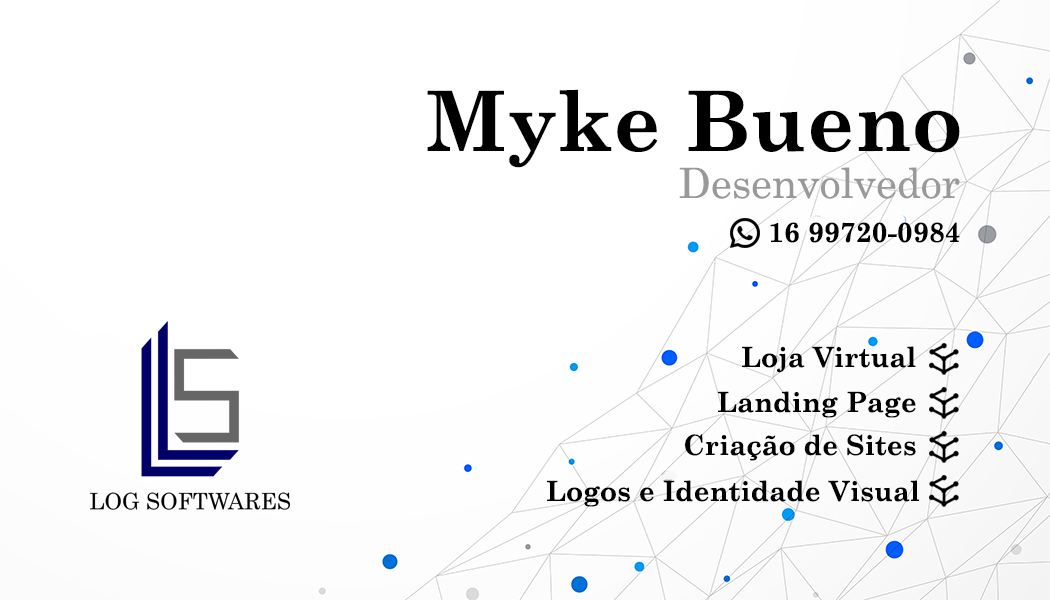
<style>
.page{position:relative;width:1050px;height:600px;background:#ffffff}
.page>*{position:absolute;margin:0}
.t1{font:83.3px "CenturySchoolbook-Bold";color:#000000}
.t2{font:41.7px "CenturySchoolbook";color:#999999}
.t3{font:27.8px "CenturySchoolbook-Bold";color:#000000}
</style>
<div class="page">
<p class="t1" style="left:427px;top:89px;width:533px;height:79px">Myke Bueno</p>
<p class="t2" style="left:679px;top:167px;width:281px;height:32px">Desenvolvedor</p>
<p class="t3" style="left:770px;top:222px;width:190px;height:21px">16 99720-0984</p>
<p class="t3" style="left:742px;top:346px;width:174px;height:27px">Loja Virtual</p>
<p class="t3" style="left:718px;top:391px;width:198px;height:27px">Landing Page</p>
<p class="t3" style="left:685px;top:434px;width:231px;height:27px">Criação de Sites</p>
<p class="t3" style="left:547px;top:480px;width:372px;height:27px">Logos e Identidade Visual</p>
</div>
